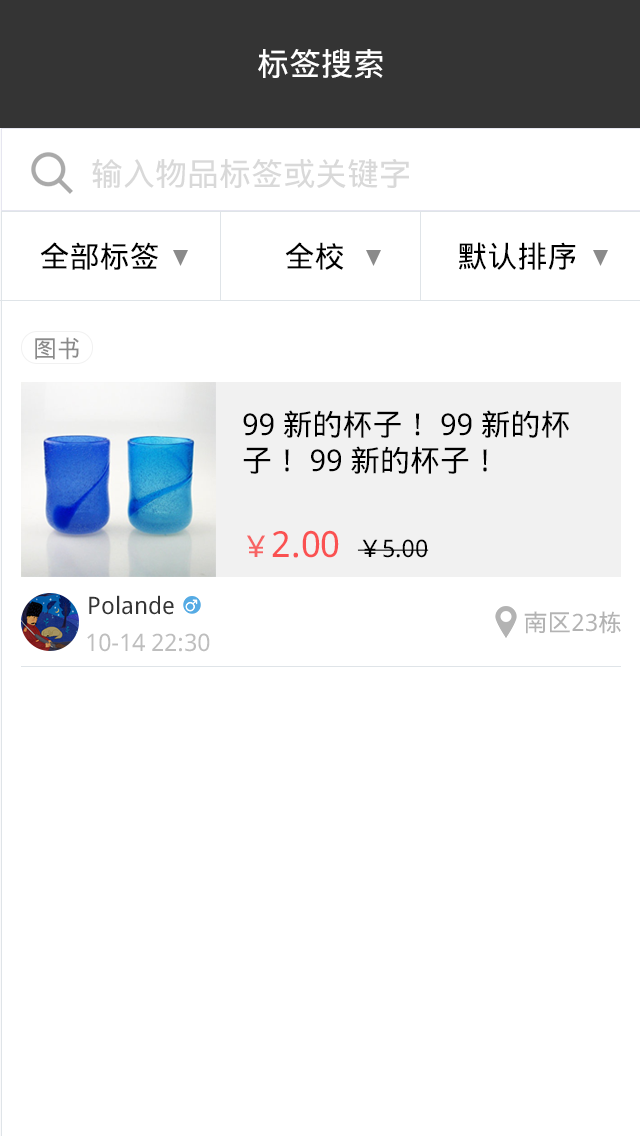
<style>
.page{position:relative;width:640px;height:1136px;background:#ffffff}
.page>*{position:absolute;margin:0}
.t1{font:32px "DroidSansFallback";color:#ffffff}
.t2{font:32px "DroidSansFallback";color:#d9d9d9}
.t3{font:30px "DroidSansFallback";color:#000000}
.t4{font:24px "DroidSansFallback";color:#8a8a8a}
.t5{font:36px "DroidSansFallback";color:#fa5151}
.t6{font:30px "DroidSansFallback";color:#f76363}
.t7{font:24px "DroidSansFallback";color:#000000}
.t8{font:24px "DroidSansFallback";color:#353535}
.t9{font:24px "DroidSansFallback";color:#b2b2b2}
.t10{font:24px "DroidSansFallback";color:#bebebe}
</style>
<div class="page">
<p class="t1" style="left:258px;top:49px;width:125px;height:30px">标签搜索</p>
<p class="t2" style="left:92px;top:159px;width:317px;height:29px">输入物品标签或关键字</p>
<p class="t3" style="left:40px;top:242px;width:118px;height:28px">全部标签</p>
<p class="t3" style="left:285px;top:242px;width:59px;height:28px">全校</p>
<p class="t3" style="left:459px;top:242px;width:117px;height:28px">默认排序</p>
<p class="t4" style="left:35px;top:337px;width:44px;height:23px">图书</p>
<p class="t3" style="left:243px;top:410px;width:326px;height:64px">99新的杯子！99新的杯<br>子！99新的杯子！</p>
<p class="t5" style="left:247px;top:530px;width:92px;height:28px"><span class="t6">￥</span>2.00</p>
<p class="t7" style="left:357px;top:539px;width:72px;height:19px">￥5.00</p>
<p class="t8" style="left:89px;top:595px;width:85px;height:20px">Polande</p>
<p class="t9" style="left:524px;top:611px;width:97px;height:23px">南区23栋</p>
<p class="t10" style="left:87px;top:633px;width:123px;height:19px">10-14 22:30</p>
</div>
